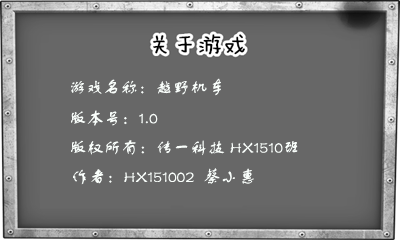
<style>
.page{position:relative;width:400px;height:240px;background:#676767}
.page>*{position:absolute;margin:0}
.t1{font:17.3px "FZSTK--GBK1-0";color:#f9fefb}
</style>
<div class="page">
<p class="t1" style="left:71px;top:78px;width:150px;height:18px">游戏名称：越野机车</p>
<p class="t1" style="left:71px;top:110px;width:87px;height:16px">版本号：1.0</p>
<p class="t1" style="left:71px;top:140px;width:227px;height:16px">版权所有：传一科技 HX1510班</p>
<p class="t1" style="left:73px;top:168px;width:181px;height:17px">作者：HX151002  蔡小惠</p>
</div>
